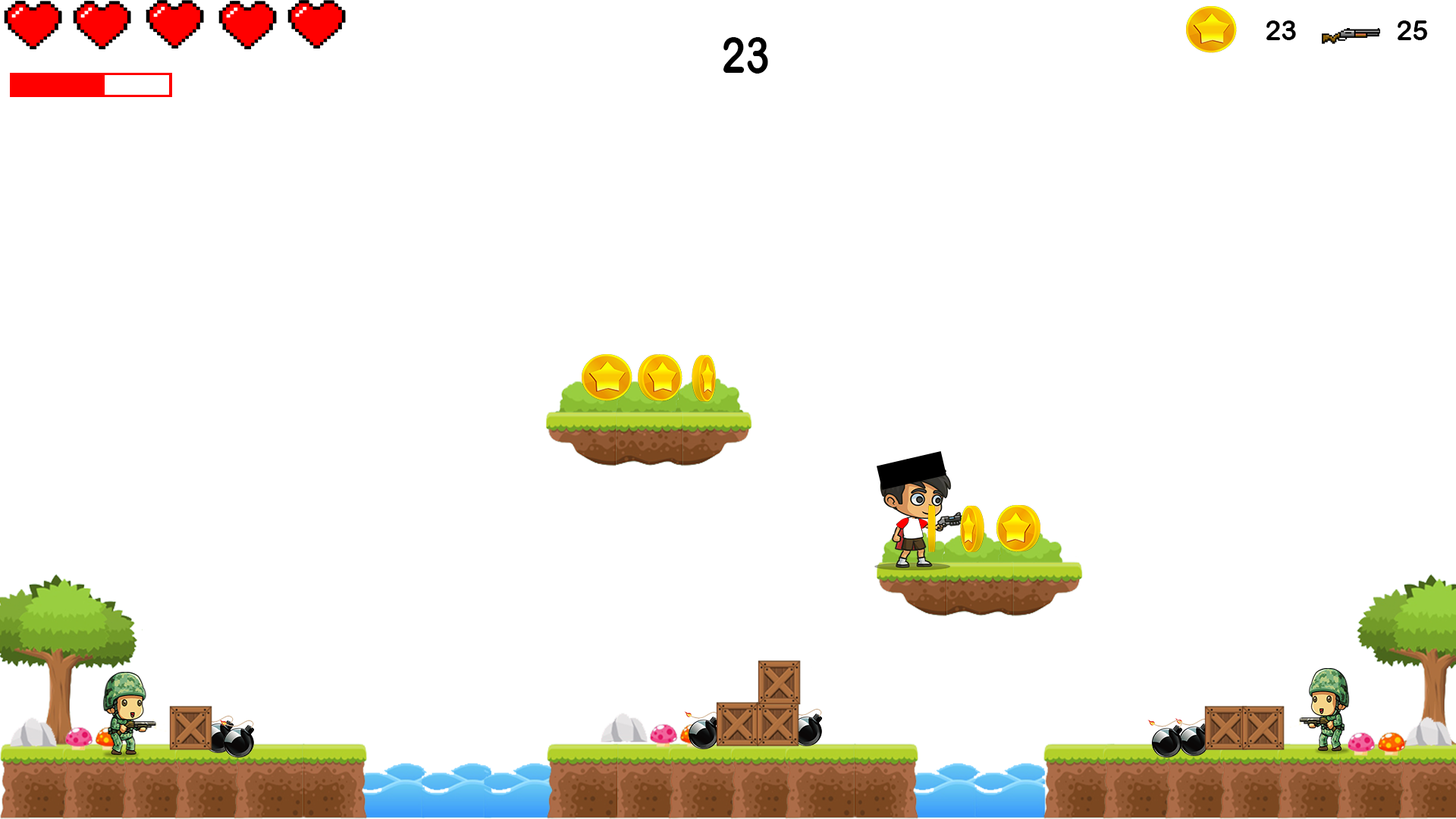
<style>
.page{position:relative;width:1456px;height:819px;background:#ffffff}
.page>*{position:absolute;margin:0}
.t1{font:27.3px "ArialRoundedMTBold";letter-spacing:0.01em;color:#000000}
.t2{font:49.9px "ArialRoundedMTBold";letter-spacing:0.01em;color:#000000;scale:0.83 1}
</style>
<div class="page">
<p class="t1" style="left:1266px;top:20px;width:30px;height:20px">23</p>
<p class="t1" style="left:1398px;top:20px;width:29px;height:20px">25</p>
<p class="t2" style="left:723px;top:37px;width:45px;height:37px">23</p>
</div>
